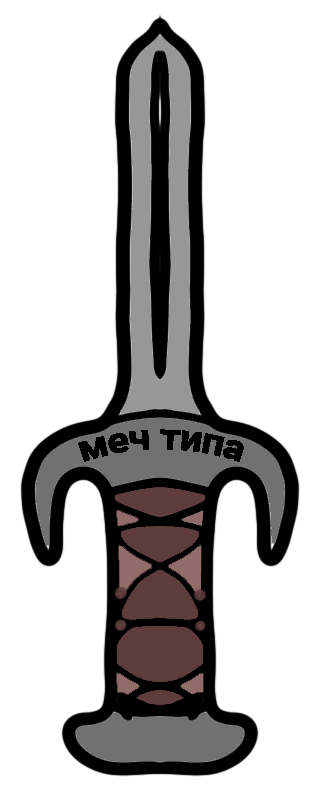
<style>
.page{position:relative;width:320px;height:800px;background:#ffffff}
.page>*{position:absolute;margin:0}
.t1{font:36px "Roboto-Bold";color:#000000}
</style>
<div class="page">
<p class="t1" style="left:78px;top:429px;width:166px;height:33px">меч типа</p>
</div>
